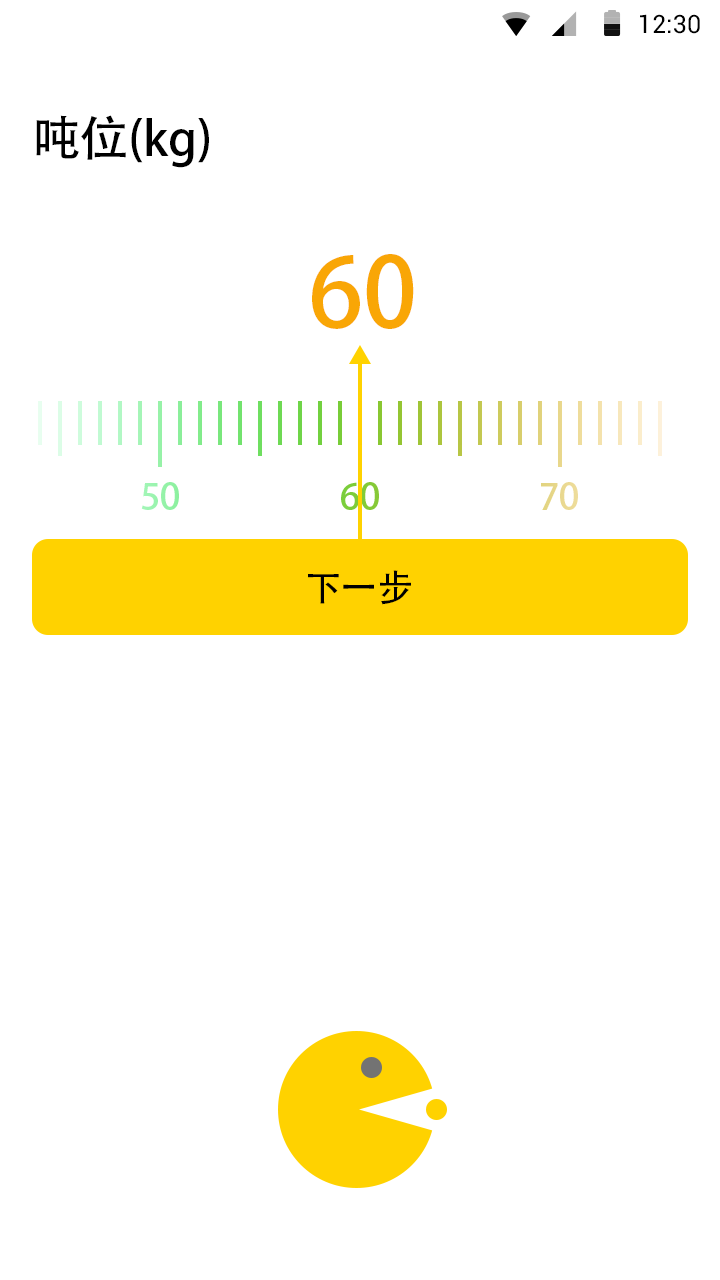
<style>
.page{position:relative;width:720px;height:1280px;background:#ffffff}
.page>*{position:absolute;margin:0}
.t1{font:25.4px "Roboto-Regular";color:#000000}
.t2{font:48px "AdobeHeitiStd-Regular";letter-spacing:-0.004em;color:#000000}
.t3{font:96px "AdobeHeitiStd-Regular";letter-spacing:-0.004em;color:#f9a606}
.t4{font:36px "AdobeHeitiStd-Regular";letter-spacing:-0.004em;color:#95f2a9}
.t5{font:36px "AdobeHeitiStd-Regular";letter-spacing:-0.004em;color:#81cb37}
.t6{font:36px "AdobeHeitiStd-Regular";letter-spacing:-0.004em;color:#e9d890}
.t7{font:36px "AdobeHeitiStd-Regular";letter-spacing:-0.004em;color:#000000}
</style>
<div class="page">
<p class="t1" style="left:640px;top:14px;width:60px;height:20px">12:30</p>
<p class="t2" style="left:36px;top:115px;width:173px;height:53px">吨位(kg)</p>
<p class="t3" style="left:312px;top:254px;width:102px;height:75px">60</p>
<p class="t4" style="left:141px;top:482px;width:38px;height:28px">50</p>
<p class="t5" style="left:341px;top:482px;width:38px;height:28px">60</p>
<p class="t6" style="left:541px;top:482px;width:37px;height:28px">70</p>
<p class="t7" style="left:308px;top:570px;width:103px;height:35px">下一步</p>
</div>
